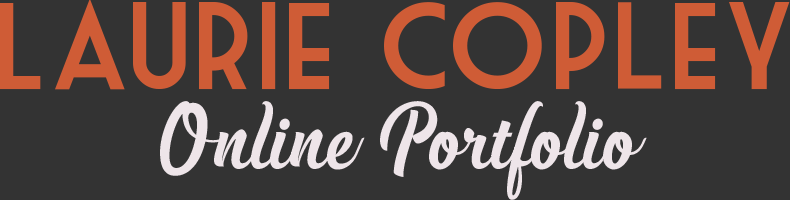
<style>
.page{position:relative;width:790px;height:200px;background:#333333}
.page>*{position:absolute;margin:0}
.t1{font:120px "MarketDeco";color:#cf5c36}
.t2{font:80px "Handycheera";color:#eee5e9}
</style>
<div class="page">
<p class="t1" style="left:0px;top:0px;width:790px;height:90px">Laurie Copley</p>
<p class="t2" style="left:160px;top:101px;width:487px;height:99px">Online Portfolio</p>
</div>
